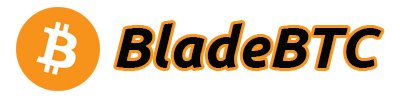
<style>
.page{position:relative;width:400px;height:100px;background:#ffffff}
.page>*{position:absolute;margin:0}
.t1{font:58.3px "Ubuntu-BoldItalic";color:#000000}
</style>
<div class="page">
<p class="t1" style="left:116px;top:23px;width:266px;height:45px">BladeBTC</p>
</div>
